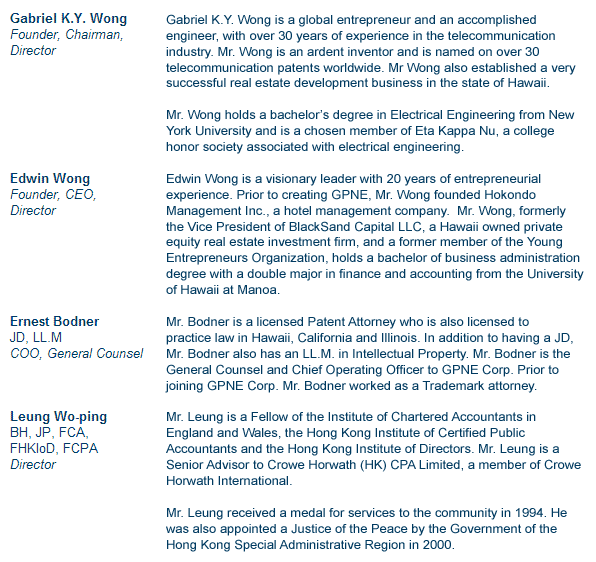
<style>
.page{position:relative;width:596px;height:562px;background:#ffffff}
.page>*{position:absolute;margin:0}
.t1{font:12.6px/15.9px "ArialMT";color:#003a60}
</style>
<div class="page">
<p class="t1" style="left:165px;top:14px;width:419px;height:538px">Gabriel K.Y. Wong is a global entrepreneur and an accomplished<br>engineer, with over 30 years of experience in the telecommunication<br>industry. Mr. Wong is an ardent inventor and is named on over 30<br>telecommunication patents worldwide. Mr Wong also established a very<br>successful real estate development business in the state of Hawaii.<br><br>Mr. Wong holds a bachelor’s degree in Electrical Engineering from New<br>York University and is a chosen member of Eta Kappa Nu, a college<br>honor society associated with electrical engineering.<br><br>Edwin Wong is a visionary leader with 20 years of entrepreneurial <br>experience. Prior to creating GPNE, Mr. Wong founded Hokondo <br>Management Inc., a hotel management company.  Mr. Wong, formerly <br>the Vice President of BlackSand Capital LLC, a Hawaii owned private <br>equity real estate investment firm, and a former member of the Young <br>Entrepreneurs Organization, holds a bachelor of business administration <br>degree with a double major in finance and accounting from the University <br>of Hawaii at Manoa.<br><br>Mr. Bodner is a licensed Patent Attorney who is also licensed to<br>practice law in Hawaii, California and Illinois. In addition to having a JD,<br>Mr. Bodner also has an LL.M. in Intellectual Property. Mr. Bodner is the<br>General Counsel and Chief Operating Officer to GPNE Corp. Prior to<br>joining GPNE Corp. Mr. Bodner worked as a Trademark attorney.<br><br>Mr. Leung is a Fellow of the Institute of Chartered Accountants in<br>England and Wales, the Hong Kong Institute of Certified Public<br>Accountants and the Hong Kong Institute of Directors. Mr. Leung is a<br>Senior Advisor to Crowe Horwath (HK) CPA Limited, a member of Crowe<br>Horwath International.<br><br>Mr. Leung received a medal for services to the community in 1994. He<br>was also appointed a Justice of the Peace by the Government of the<br>Hong Kong Special Administrative Region in 2000.</p>
</div>
